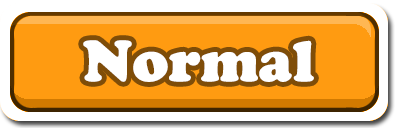
<style>
.page{position:relative;width:397px;height:128px;background:#ff9b11}
.page>*{position:absolute;margin:0}
.t1{font:60px "CooperBlack";color:#ffffff}
</style>
<div class="page">
<p class="t1" style="left:83px;top:40px;width:231px;height:42px">Normal</p>
</div>
